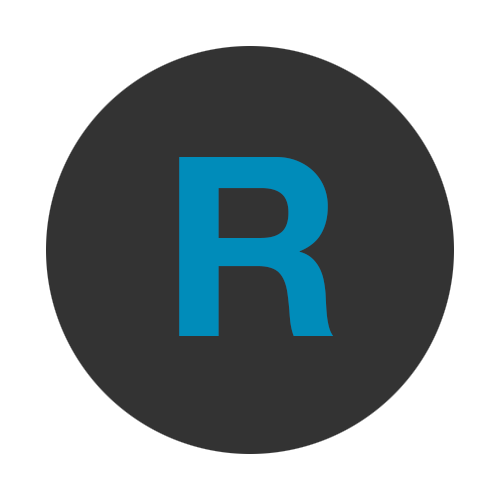
<style>
.page{position:relative;width:500px;height:500px;background:#ffffff}
.page>*{position:absolute;margin:0}
.t1{font:250px "HelveticaNeue-Bold";color:#008cba}
</style>
<div class="page">
<p class="t1" style="left:179px;top:157px;width:154px;height:179px">R</p>
</div>
